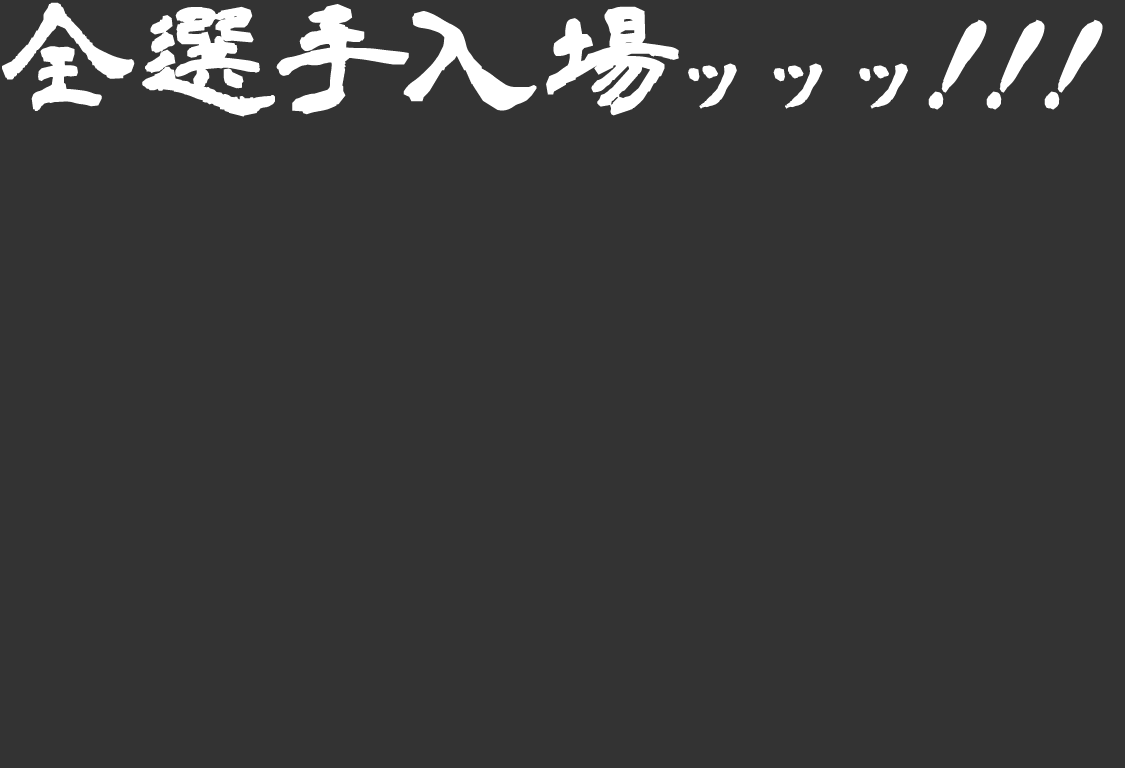
<style>
.page{position:relative;width:1125px;height:768px;background:#333333}
.page>*{position:absolute;margin:0}
.t1{font:130px "aoyagireisyo2";color:#ffffff;font-weight:bold}
.t2{font:110px "aoyagireisyo2";color:#ffffff;font-weight:bold}
.t3{font:137.3px "aoyagireisyo2";color:#ffffff;font-weight:bold;font-style:italic}
</style>
<div class="page">
<p class="t1" style="left:2px;top:2px;width:906px;height:115px">全選手入場<span class="t2">ッッッ</span></p>
<p class="t3" style="left:928px;top:19px;width:59px;height:91px;rotate:20deg">！</p>
<p class="t3" style="left:986px;top:19px;width:59px;height:91px;rotate:20deg">！</p>
<p class="t3" style="left:1044px;top:19px;width:59px;height:91px;rotate:20deg">！</p>
</div>
